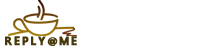
<style>
.page{position:relative;width:211px;height:48px;background:#ffffff}
.page>*{position:absolute;margin:0}
.t1{font:15.8px "ThaiSansNeue-Black";letter-spacing:0.1em;color:#47380b;text-transform:uppercase;font-weight:bold;scale:0.97 1}
</style>
<div class="page">
<p class="t1" style="left:5px;top:36px;width:72px;height:10px">ReplY@ME</p>
</div>
